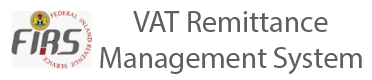
<style>
.page{position:relative;width:372px;height:80px;background:#ffffff}
.page>*{position:absolute;margin:0}
.t1{font:30px "MyriadPro-Regular";color:#605f5e}
</style>
<div class="page">
<p class="t1" style="left:100px;top:11px;width:262px;height:64px;text-align:center">VAT Remittance<br>Management System</p>
</div>
